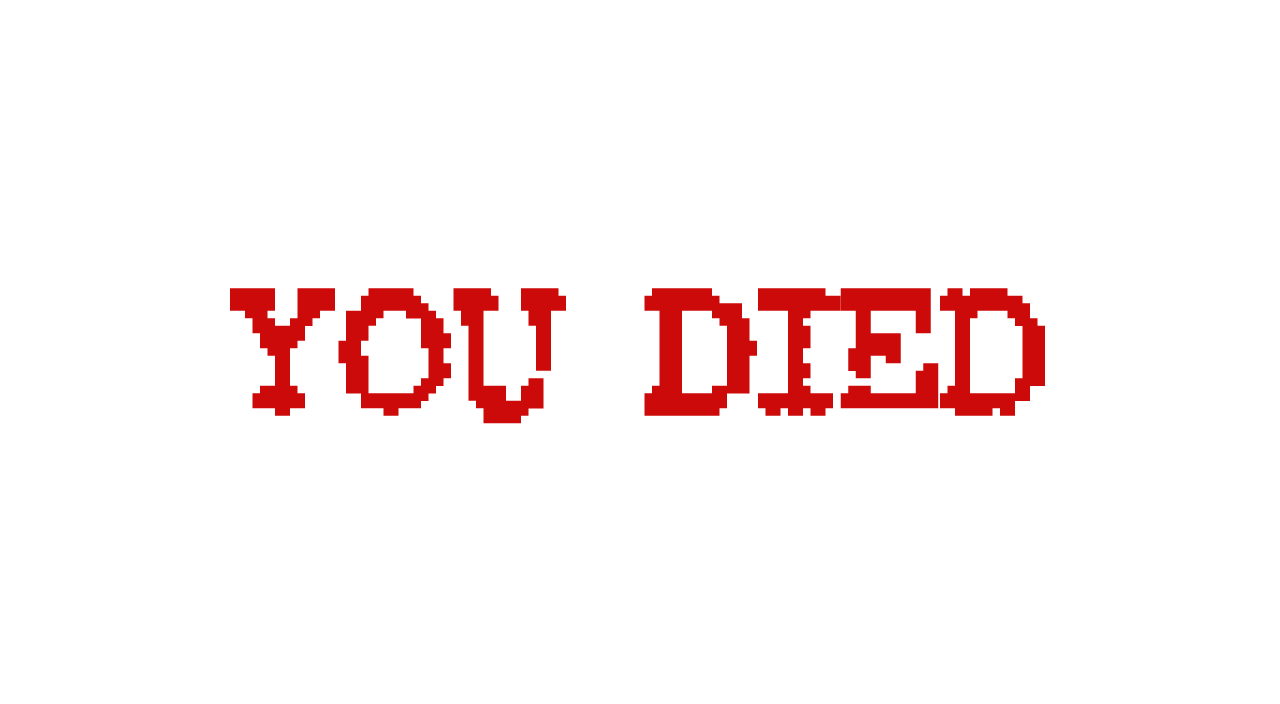
<style>
.page{position:relative;width:1280px;height:704px;background:#ffffff}
.page>*{position:absolute;margin:0}
.t1{font:150px "RubberBiscuitBold";color:#cd0a0a}
</style>
<div class="page">
<p class="t1" style="left:230px;top:288px;width:815px;height:136px">You Died</p>
</div>
